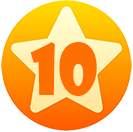
<style>
.page{position:relative;width:133px;height:132px;background:#ffffff}
.page>*{position:absolute;margin:0}
.t1{font:68px "ShowcardGothic-Reg";color:#fd6f01}
</style>
<div class="page">
<p class="t1" style="left:30px;top:42px;width:67px;height:54px">10</p>
</div>
